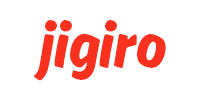
<style>
.page{position:relative;width:200px;height:100px;background:#ffffff}
.page>*{position:absolute;margin:0}
.t1{font:66.7px "Ahkio-Regular";color:#fa311f}
</style>
<div class="page">
<p class="t1" style="left:34px;top:20px;width:132px;height:61px">jigiro</p>
</div>
